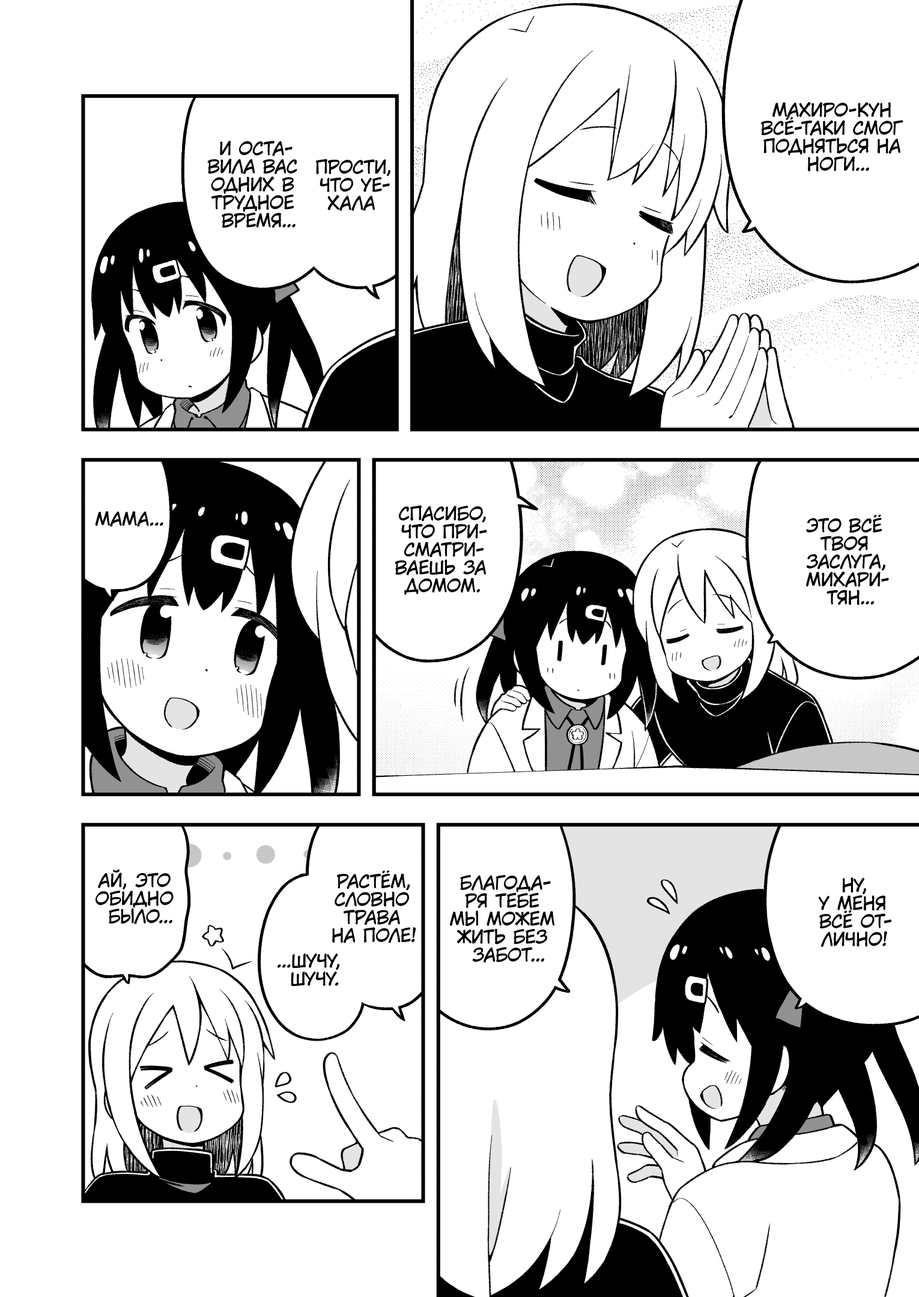
<style>
.page{position:relative;width:919px;height:1297px;background:#ffffff}
.page>*{position:absolute;margin:0}
.t1{font:18px "KuraiVoice2";color:#000000;text-transform:uppercase}
</style>
<div class="page">
<p class="t1" style="left:761px;top:102px;width:142px;height:70px;text-align:center">Махиро-кун<br>всё-таки смог<br>подняться на<br>ноги...</p>
<p class="t1" style="left:207px;top:141px;width:90px;height:87px;text-align:center">и оста-<br>вила вас<br>одних в<br>трудное<br>время...</p>
<p class="t1" style="left:316px;top:159px;width:74px;height:52px;text-align:center">Прости,<br>что уе-<br>хала</p>
<p class="t1" style="left:395px;top:505px;width:92px;height:90px;text-align:center">Спасибо,<br>что при-<br>сматри-<br>ваешь за<br>домом.</p>
<p class="t1" style="left:95px;top:511px;width:68px;height:16px">Мама...</p>
<p class="t1" style="left:806px;top:515px;width:83px;height:90px;text-align:center">Это всё<br>твоя<br>заслуга,<br>Михари-<br>тян...</p>
<p class="t1" style="left:96px;top:869px;width:78px;height:55px;text-align:center">Ай, это<br>обидно<br>было...</p>
<p class="t1" style="left:332px;top:870px;width:84px;height:74px;text-align:center">Растём,<br>словно<br>трава<br>на поле!</p>
<p class="t1" style="left:450px;top:875px;width:104px;height:88px;text-align:center">Благода-<br>ря тебе<br>мы можем<br>жить без<br>забот...</p>
<p class="t1" style="left:819px;top:878px;width:72px;height:69px;text-align:center">Ну,<br>у меня<br>всё от-<br>лично!</p>
<p class="t1" style="left:278px;top:954px;width:62px;height:33px;text-align:center">...Шучу,<br>шучу.</p>
</div>
